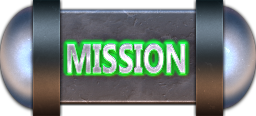
<style>
.page{position:relative;width:256px;height:116px}
.page>*{position:absolute;margin:0}
.t1{font:40.6px "SegoeUI-Bold";scale:0.71 1}
</style>
<div class="page">
<p class="t1" style="left:67px;top:43px;width:118px;height:30px">MISSION</p>
<p class="t1" style="left:67px;top:44px;width:118px;height:30px">MISSION</p>
</div>
